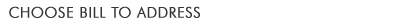
<style>
.page{position:relative;width:400px;height:24px;background:#ffffff}
.page>*{position:absolute;margin:0}
.t1{font:14.7px "FuturaBT-Light";letter-spacing:0.025em;color:#363636;text-transform:uppercase;font-weight:bold}
</style>
<div class="page">
<p class="t1" style="left:9px;top:6px;width:191px;height:12px">CHOOSE BILL TO ADDRESS</p>
</div>
